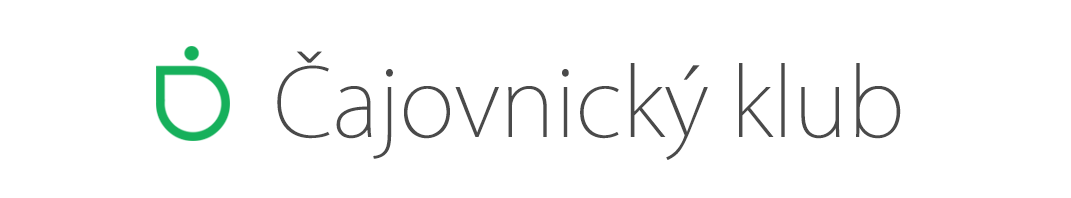
<style>
.page{position:relative;width:1071px;height:198px;background:#ffffff}
.page>*{position:absolute;margin:0}
.t1{font:93px "KozGoPr6N-ExtraLight";color:#4a4a4a}
</style>
<div class="page">
<p class="t1" style="left:277px;top:51px;width:624px;height:109px">Čajovnický klub</p>
</div>
